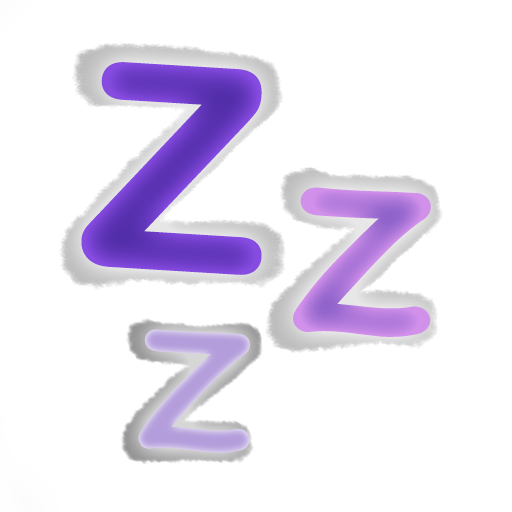
<style>
.page{position:relative;width:512px;height:512px;background:#ffffff}
.page>*{position:absolute;margin:0}
.t1{font:276.1px "ArialRoundedMTBold";color:#693ac2;font-weight:bold}
.t2{font:220.9px "ChalkboardSE-Regular";font-weight:bold}
.t3{font:182.2px "Chalkboard";color:#b39ddb;font-weight:bold}
</style>
<div class="page">
<p class="t1" style="left:81px;top:62px;width:181px;height:213px;rotate:3deg">Z</p>
<p class="t2" style="left:293px;top:187px;width:138px;height:150px;rotate:3deg">Z</p>
<p class="t3" style="left:138px;top:329px;width:112px;height:124px;rotate:3deg">Z</p>
</div>
